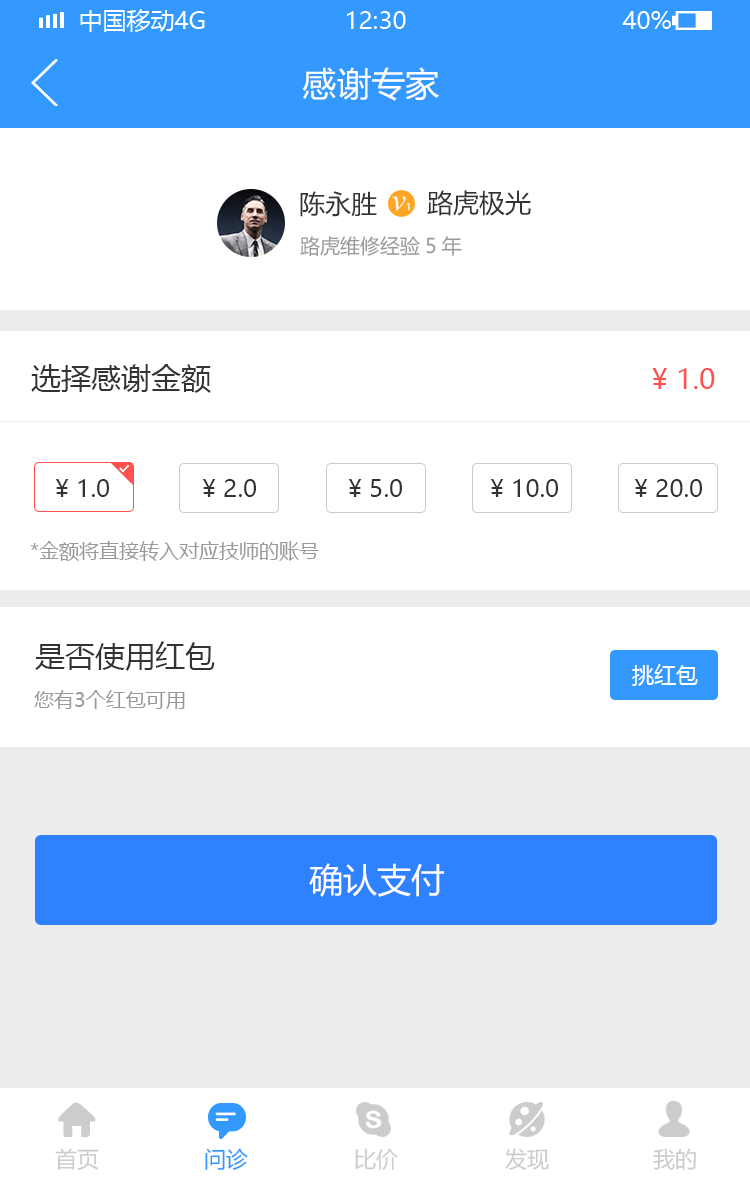
<style>
.page{position:relative;width:750px;height:1186px;background:#ffffff}
.page>*{position:absolute;margin:0}
.t1{font:34px "MicrosoftYaHei";color:#ffffff}
.t2{font:26px "MicrosoftYaHei";color:#333333}
.t3{font:20px "MicrosoftYaHei";color:#999999}
.t4{font:30px "MicrosoftYaHei";color:#333333}
.t5{font:28px "MicrosoftYaHei";color:#ff5050}
.t6{font:24px "MicrosoftYaHei";color:#333333}
.t7{font:22px "MicrosoftYaHei";color:#ffffff}
.t8{font:22px "MicrosoftYaHei";color:#cccccc}
.t9{font:22px "MicrosoftYaHei";color:#3399ff}
</style>
<div class="page">
<p class="t1" style="left:302px;top:67px;width:137px;height:34px">感谢专家</p>
<p class="t2" style="left:300px;top:191px;width:77px;height:26px">陈永胜</p>
<p class="t2" style="left:427px;top:190px;width:104px;height:26px">路虎极光</p>
<p class="t3" style="left:300px;top:236px;width:162px;height:20px">路虎维修经验5年</p>
<p class="t4" style="left:31px;top:364px;width:180px;height:29px">选择感谢金额</p>
<p class="t5" style="left:652px;top:368px;width:63px;height:21px">¥ 1.0</p>
<p class="t6" style="left:55px;top:479px;width:54px;height:18px">¥ 1.0</p>
<p class="t6" style="left:202px;top:479px;width:54px;height:18px">¥ 2.0</p>
<p class="t6" style="left:348px;top:479px;width:54px;height:18px">¥ 5.0</p>
<p class="t6" style="left:490px;top:479px;width:68px;height:18px">¥ 10.0</p>
<p class="t6" style="left:634px;top:479px;width:68px;height:18px">¥ 20.0</p>
<p class="t3" style="left:30px;top:541px;width:289px;height:20px">*金额将直接转入对应技师的账号</p>
<p class="t4" style="left:35px;top:641px;width:180px;height:30px">是否使用红包</p>
<p class="t7" style="left:632px;top:664px;width:66px;height:22px">挑红包</p>
<p class="t3" style="left:34px;top:690px;width:151px;height:19px">您有3个红包可用</p>
<p class="t1" style="left:309px;top:863px;width:135px;height:34px">确认支付</p>
<p class="t8" style="left:55px;top:1148px;width:44px;height:22px">首页</p>
<p class="t9" style="left:205px;top:1148px;width:43px;height:22px">问诊</p>
<p class="t8" style="left:355px;top:1148px;width:43px;height:22px">比价</p>
<p class="t8" style="left:505px;top:1148px;width:44px;height:22px">发现</p>
<p class="t8" style="left:653px;top:1148px;width:43px;height:22px">我的</p>
</div>
